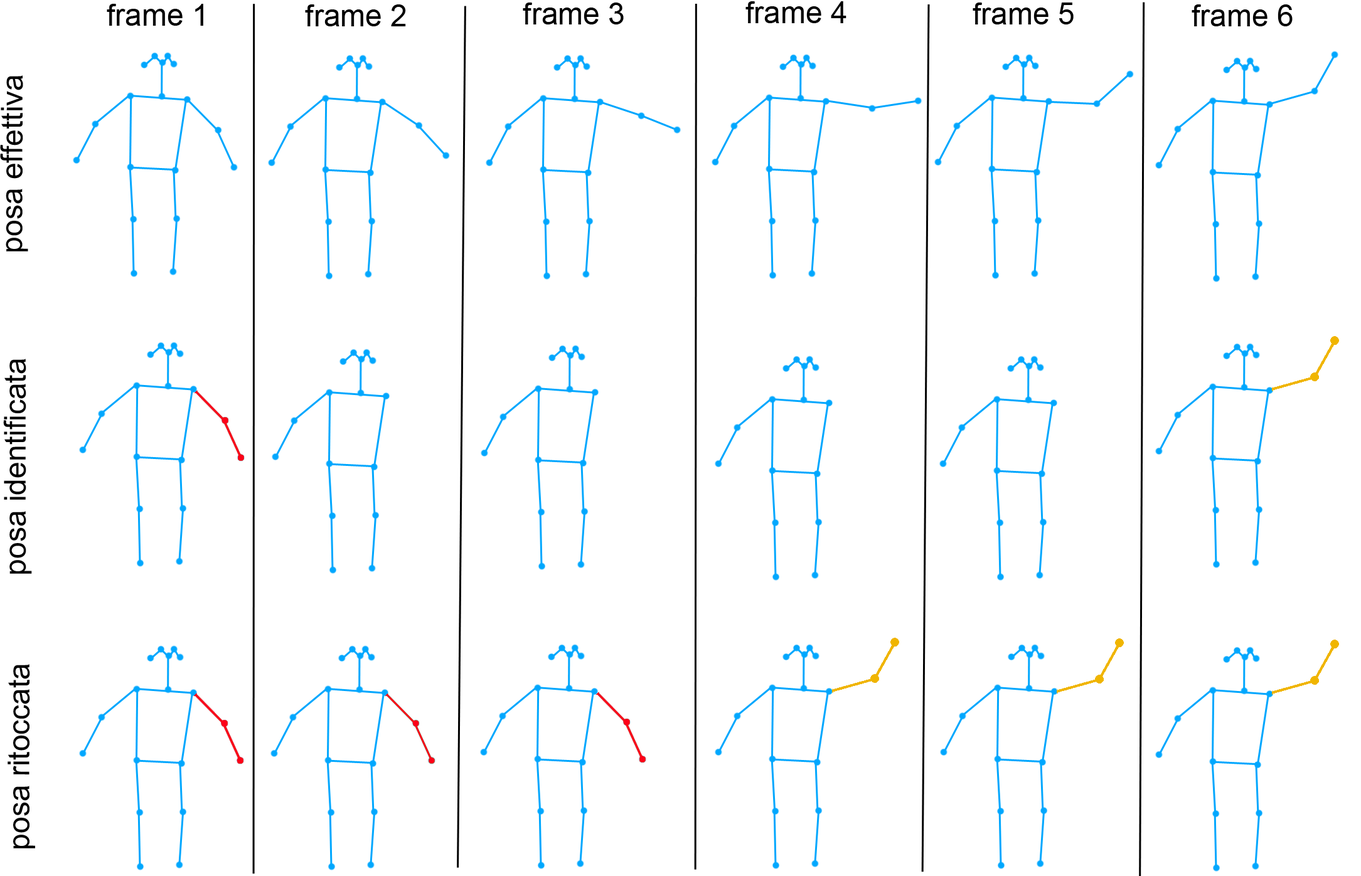
<style>
.page{position:relative;width:1361px;height:876px;background:#ffffff}
.page>*{position:absolute;margin:0}
.t1{font:30.1px "ArialMT";color:#000000}
</style>
<div class="page">
<p class="t1" style="left:107px;top:4px;width:96px;height:22px">frame 1</p>
<p class="t1" style="left:305px;top:4px;width:101px;height:22px">frame 2</p>
<p class="t1" style="left:523px;top:3px;width:101px;height:21px">frame 3</p>
<p class="t1" style="left:745px;top:1px;width:101px;height:22px">frame 4</p>
<p class="t1" style="left:972px;top:3px;width:101px;height:21px">frame 5</p>
<p class="t1" style="left:1191px;top:4px;width:101px;height:22px">frame 6</p>
<p class="t1" style="left:0px;top:75px;width:28px;height:177px;rotate:-90deg">posa effettiva</p>
<p class="t1" style="left:3px;top:359px;width:29px;height:215px;rotate:-90deg">posa identificata</p>
<p class="t1" style="left:8px;top:664px;width:27px;height:185px;rotate:-90deg">posa ritoccata</p>
</div>
